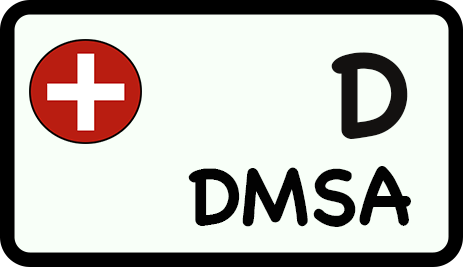
<style>
.page{position:relative;width:463px;height:267px;background:#f8fff8}
.page>*{position:absolute;margin:0}
.t1{font:120px "Chalkboard-Bold";color:#131110}
.t2{font:80px "Chalkboard-Bold";color:#020202}
</style>
<div class="page">
<p class="t1" style="left:331px;top:52px;width:77px;height:87px">D</p>
<p class="t2" style="left:188px;top:166px;width:223px;height:61px">DMSA</p>
</div>
